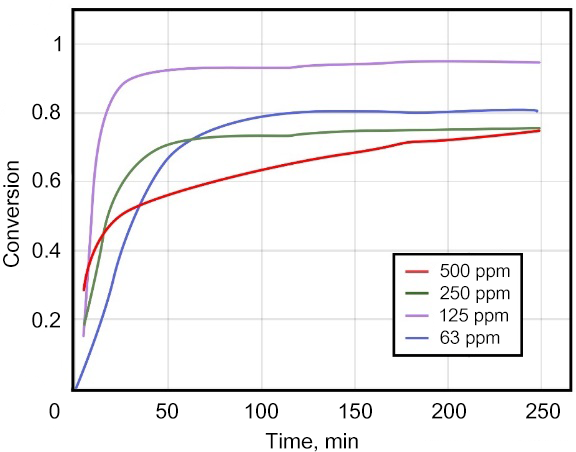
<style>
.page{position:relative;width:576px;height:452px;background:#ffffff}
.page>*{position:absolute;margin:0}
.t1{font:21.4px "ArialUnicodeMS";color:#000000}
.t2{font:18.3px "ArialUnicodeMS";color:#000000}
</style>
<div class="page">
<p class="t1" style="left:54px;top:36px;width:7px;height:16px">1</p>
<p class="t1" style="left:32px;top:103px;width:28px;height:17px">0.8</p>
<p class="t1" style="left:3px;top:161px;width:16px;height:106px;rotate:-90deg">Conversion</p>
<p class="t1" style="left:32px;top:172px;width:29px;height:16px">0.6</p>
<p class="t1" style="left:32px;top:242px;width:29px;height:16px">0.4</p>
<p class="t2" style="left:440px;top:263px;width:70px;height:85px">500 ppm<br>250 ppm<br>125 ppm<br>63 ppm</p>
<p class="t1" style="left:32px;top:312px;width:28px;height:16px">0.2</p>
<p class="t1" style="left:49px;top:403px;width:11px;height:16px">0</p>
<p class="t1" style="left:156px;top:403px;width:22px;height:16px">50</p>
<p class="t1" style="left:245px;top:403px;width:33px;height:16px">100</p>
<p class="t1" style="left:339px;top:403px;width:33px;height:16px">150</p>
<p class="t1" style="left:432px;top:403px;width:34px;height:16px">200</p>
<p class="t1" style="left:526px;top:403px;width:34px;height:16px">250</p>
<p class="t1" style="left:265px;top:433px;width:93px;height:19px">Time, min</p>
</div>
